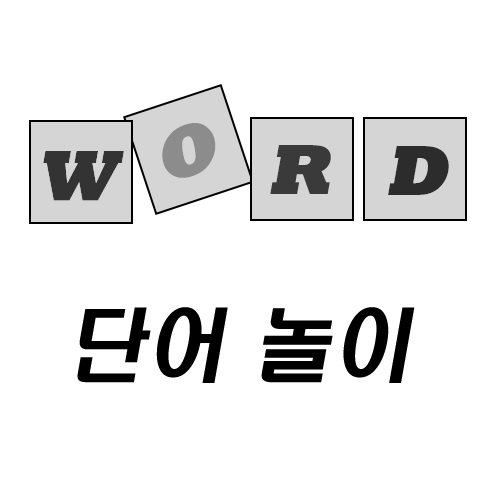
<style>
.page{position:relative;width:500px;height:500px;background:#ffffff}
.page>*{position:absolute;margin:0}
.t1{font:80px "H2hdrM";color:#000000;font-style:italic}
</style>
<div class="page">
<p class="t1" style="left:77px;top:307px;width:338px;height:76px">단어 놀이</p>
<p class="t1" style="left:77px;top:307px;width:338px;height:76px">단어 놀이</p>
</div>
